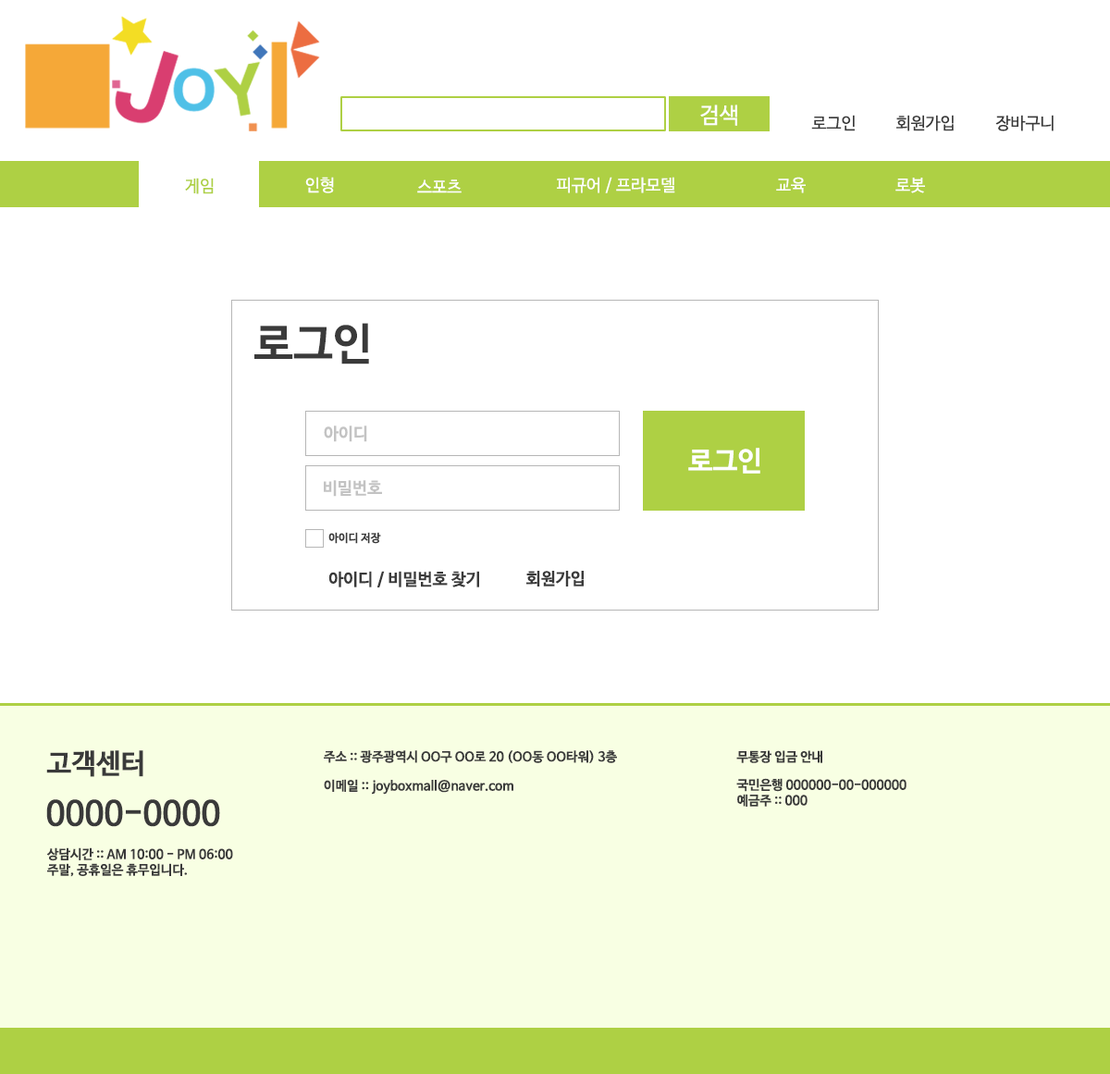
<style>
.page{position:relative;width:1110px;height:1074px;background:#ffffff}
.page>*{position:absolute;margin:0}
.t1{font:22.2px "NanumBarunGothic";color:#ffffff}
.t2{font:16.7px "NanumBarunGothic";color:#3a3a3a}
.t3{font:16.7px "NanumBarunGothic";color:#aed044}
.t4{font:16.7px "NanumBarunGothic";color:#ffffff}
.t5{font:44.4px "NanumBarunGothicBold";color:#3a3a3a}
.t6{font:16.7px "NanumBarunGothicBold";color:#c3c3c3}
.t7{font:27.8px "NanumBarunGothicBold";color:#ffffff}
.t8{font:11.1px "NanumBarunGothicBold";color:#3a3a3a}
.t9{font:16.7px "NanumBarunGothicBold";color:#3a3a3a}
.t10{font:27.8px "NanumBarunGothicBold";color:#3a3a3a}
.t11{font:13px "NanumBarunGothicBold";color:#3a3a3a}
.t12{font:33.3px "NanumBarunGothicBold";color:#3a3a3a}
</style>
<div class="page">
<p class="t1" style="left:700px;top:105px;width:37px;height:21px">검색</p>
<p class="t2" style="left:811px;top:115px;width:44px;height:16px">로그인</p>
<p class="t2" style="left:896px;top:115px;width:58px;height:16px">회원가입</p>
<p class="t2" style="left:995px;top:115px;width:59px;height:16px">장바구니</p>
<p class="t3" style="left:185px;top:178px;width:29px;height:16px">게임</p>
<p class="t4" style="left:305px;top:177px;width:29px;height:16px">인형</p>
<p class="t4" style="left:417px;top:179px;width:45px;height:14px">스포츠</p>
<p class="t4" style="left:557px;top:177px;width:118px;height:16px">피규어 / 프라모델</p>
<p class="t4" style="left:776px;top:177px;width:30px;height:16px">교육</p>
<p class="t4" style="left:896px;top:178px;width:29px;height:15px">로봇</p>
<p class="t5" style="left:254px;top:323px;width:115px;height:42px">로그인</p>
<p class="t6" style="left:324px;top:426px;width:43px;height:16px">아이디</p>
<p class="t7" style="left:688px;top:448px;width:72px;height:26px">로그인</p>
<p class="t6" style="left:324px;top:480px;width:58px;height:17px">비밀번호</p>
<p class="t8" style="left:328px;top:532px;width:53px;height:12px">아이디 저장</p>
<p class="t9" style="left:328px;top:571px;width:151px;height:16px">아이디 / 비밀번호 찾기</p>
<p class="t9" style="left:526px;top:571px;width:58px;height:16px">회원가입</p>
<p class="t10" style="left:46px;top:750px;width:97px;height:27px">고객센터</p>
<p class="t11" style="left:324px;top:750px;width:293px;height:13px">주소 :: 광주광역시 OO구 OO로 20 (OO동 OO타워) 3층</p>
<p class="t11" style="left:736px;top:750px;width:86px;height:13px">무통장 입금 안내</p>
<p class="t11" style="left:324px;top:779px;width:189px;height:16px">이메일 :: joyboxmall@naver.com</p>
<p class="t11" style="left:736px;top:778px;width:171px;height:29px">국민은행 000000-00-000000<br>예금주 :: 000</p>
<p class="t12" style="left:46px;top:799px;width:174px;height:28px">0000-0000</p>
<p class="t11" style="left:46px;top:847px;width:187px;height:30px">상담시간 :: AM 10:00 - PM 06:00<br>주말, 공휴일은 휴무입니다.</p>
</div>
